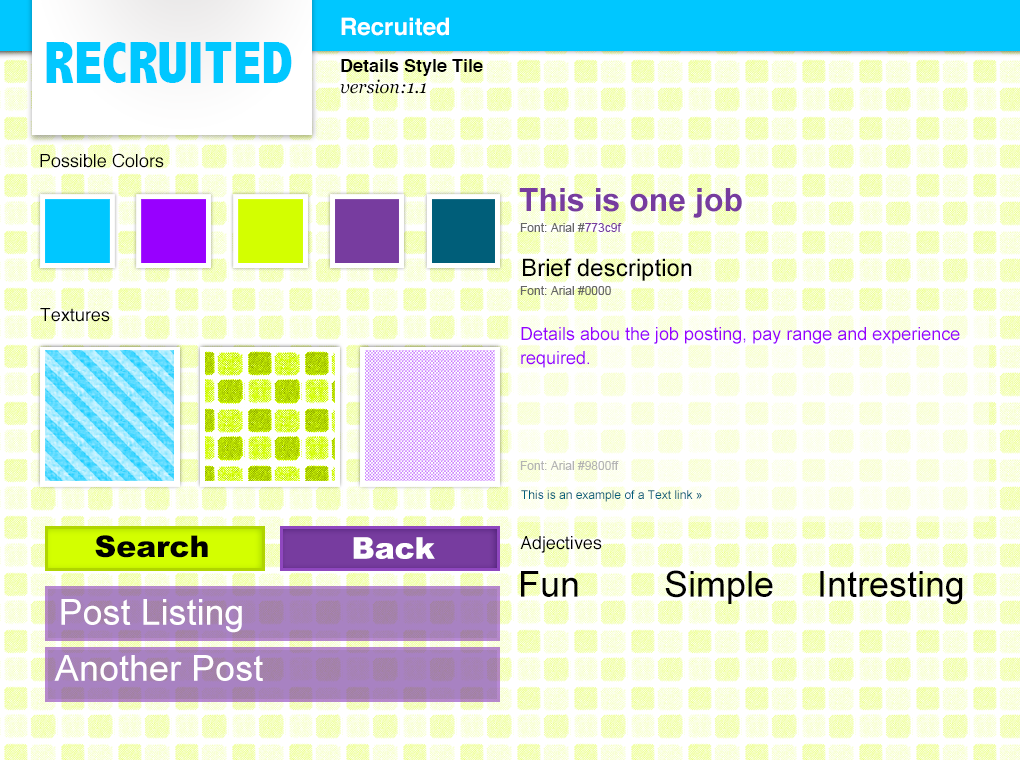
<style>
.page{position:relative;width:1020px;height:760px;background:#ffffff}
.page>*{position:absolute;margin:0}
.t1{font:24px "Helvetica-Bold";color:#ffffff}
.t2{font:60px "AbadiMT-CondensedExtraBold";color:#00c7ff}
.t3{font:18px "Helvetica-Bold";color:#000000}
.t4{font:18px "Georgia-Italic";color:#000000}
.t5{font:18px "Helvetica";color:#000000}
.t6{font:32px "Arial-BoldMT";color:#773c9f}
.t7{font:12px "ArialMT";color:#666666}
.t8{font:12px "ArialMT";color:#773c9f}
.t9{font:24px "ArialMT";color:#000000}
.t10{font:18px/24px "ArialMT";color:#9800ff}
.t11{font:12px "ArialMT";color:#b3b3b3}
.t12{font:12px "ArialMT";color:#005e79}
.t13{font:30px "Arial-Black";color:#000000}
.t14{font:30px "Arial-Black";color:#ffffff}
.t15{font:36px "ArialMT";color:#000000}
.t16{font:36px "ArialMT";color:#ffffff}
</style>
<div class="page">
<p class="t1" style="left:341px;top:17px;width:108px;height:19px">Recruited</p>
<p class="t2" style="left:46px;top:42px;width:246px;height:41px">RECRUITED</p>
<p class="t3" style="left:341px;top:59px;width:142px;height:17px">Details Style Tile</p>
<p class="t4" style="left:340px;top:79px;width:86px;height:15px">version:1.1</p>
<p class="t5" style="left:40px;top:153px;width:124px;height:15px">Possible Colors</p>
<p class="t6" style="left:519px;top:188px;width:223px;height:30px">This is one job</p>
<p class="t7" style="left:520px;top:223px;width:102px;height:9px">Font: Arial #<span class="t8">773c9f</span></p>
<p class="t9" style="left:523px;top:258px;width:169px;height:23px">Brief description</p>
<p class="t7" style="left:520px;top:286px;width:91px;height:9px">Font: Arial #0000</p>
<p class="t5" style="left:40px;top:308px;width:70px;height:14px">Textures</p>
<p class="t10" style="left:521px;top:327px;width:439px;height:41px">Details abou the job posting, pay range and experience required.</p>
<p class="t11" style="left:520px;top:461px;width:99px;height:9px">Font: Arial #9800ff</p>
<p class="t12" style="left:521px;top:490px;width:181px;height:12px">This is an example of a Text link »</p>
<p class="t13" style="left:95px;top:535px;width:113px;height:23px">Search</p>
<p class="t14" style="left:353px;top:537px;width:82px;height:22px">Back</p>
<p class="t5" style="left:520px;top:536px;width:82px;height:17px">Adjectives</p>
<p class="t15" style="left:521px;top:571px;width:57px;height:26px">Fun</p>
<p class="t15" style="left:665px;top:570px;width:108px;height:34px">Simple</p>
<p class="t15" style="left:820px;top:571px;width:143px;height:34px">Intresting</p>
<p class="t16" style="left:61px;top:599px;width:181px;height:34px">Post Listing</p>
<p class="t16" style="left:54px;top:655px;width:209px;height:26px">Another Post</p>
</div>
